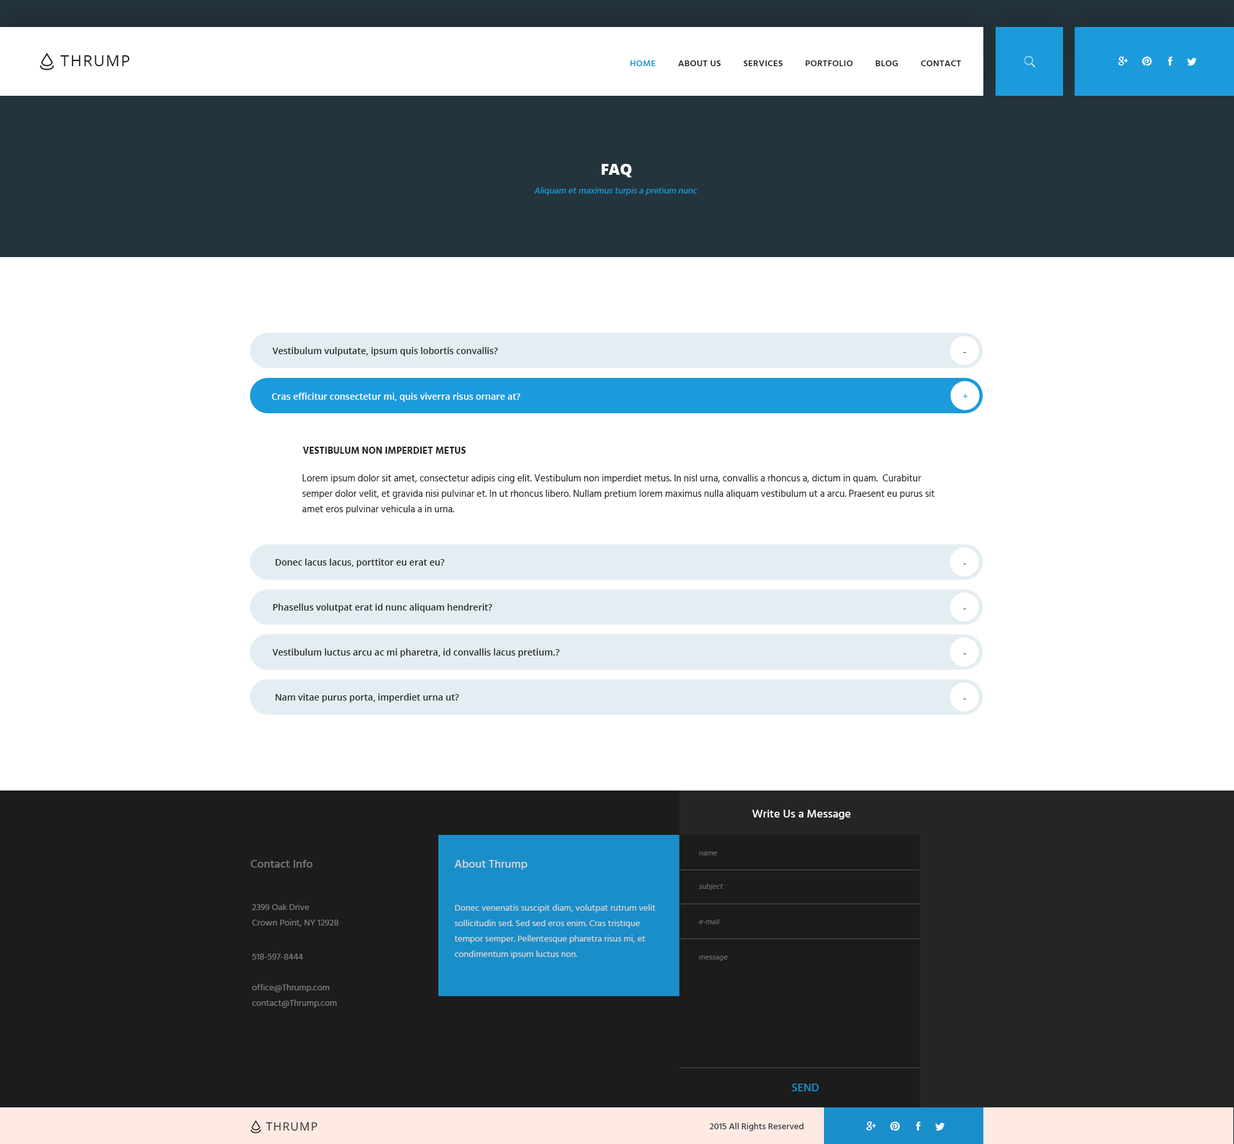
<style>
.page{position:relative;width:1234px;height:1144px;background:#ffffff}
.page>*{position:absolute;margin:0}
.t1{font:15.4px "OpenSans";letter-spacing:0.075em;color:#252525;text-transform:uppercase}
.t2{font:9px "Hind-Semibold";letter-spacing:0.025em;color:#252525;text-transform:uppercase}
.t3{font:9px "Hind-Semibold";letter-spacing:0.025em;color:#1c9bdc;text-transform:uppercase}
.t4{font:15.4px "OpenSans-Extrabold";color:#ffffff;text-transform:uppercase}
.t5{font:9px "Hind-Regular";color:#1c9bdc;font-style:italic}
.t6{font:9px "OpenSans-Semibold";color:#252525}
.t7{font:9px "OpenSans-Semibold";color:#ffffff}
.t8{font:9px "OpenSans-Semibold";color:#1c9bdc}
.t9{font:9.6px "Hind-Bold";color:#252525;text-transform:uppercase}
.t10{font:9.6px/15.4px "Hind-Regular";color:#252525}
.t11{font:11.6px "Hind-Medium";color:#ffffff}
.t12{font:7.7px "Hind-Regular";color:#686868;font-style:italic}
.t13{font:11.6px "Hind-Medium";color:#7b7b7b}
.t14{font:11.6px "Hind-Medium";color:#d6d6d6}
.t15{font:9px/15.4px "Hind-Regular";color:#7b7b7b}
.t16{font:9px/15.4px "Hind-Regular";color:#d6d6d6}
.t17{font:9px "Hind-Regular";color:#7b7b7b}
.t18{font:11.6px "Hind-Medium";color:#1a8ec9}
.t19{font:11.4px "OpenSans";letter-spacing:0.075em;color:#252525;text-transform:uppercase}
.t20{font:9px "Hind-Medium";color:#273941}
</style>
<div class="page">
<p class="t1" style="left:60px;top:55px;width:70px;height:11px">Thrump</p>
<p class="t2" style="left:630px;top:60px;width:332px;height:6px"><span class="t3">Home</span>         About Us         Services         Portfolio         Blog         Contact</p>
<p class="t4" style="left:602px;top:164px;width:30px;height:13px">FAq</p>
<p class="t5" style="left:534px;top:187px;width:164px;height:8px">Aliquam et maximus turpis a pretium nunc</p>
<p class="t6" style="left:273px;top:347px;width:225px;height:9px">Vestibulum vulputate, ipsum quis lobortis convallis?</p>
<p class="t6" style="left:964px;top:352px;width:2px;height:1px">-</p>
<p class="t7" style="left:272px;top:393px;width:249px;height:9px">Cras efficitur consectetur mi, quis viverra risus ornare at?</p>
<p class="t8" style="left:963px;top:394px;width:5px;height:5px">+</p>
<p class="t9" style="left:303px;top:447px;width:163px;height:7px">Vestibulum non imperdiet metus</p>
<p class="t10" style="left:302px;top:474px;width:633px;height:40px">Lorem ipsum dolor sit amet, consectetur adipis cing elit. Vestibulum non imperdiet metus. In nisl urna, convallis a rhoncus a, dictum in quam.  Curabitur semper dolor velit, et gravida nisi pulvinar et. In ut rhoncus libero. Nullam pretium lorem maximus nulla aliquam vestibulum ut a arcu. Praesent eu purus sit amet eros pulvinar vehicula a in urna.</p>
<p class="t6" style="left:275px;top:559px;width:170px;height:9px">Donec lacus lacus, porttitor eu erat eu?</p>
<p class="t6" style="left:964px;top:564px;width:2px;height:0px">-</p>
<p class="t6" style="left:273px;top:604px;width:219px;height:9px">Phasellus volutpat erat id nunc aliquam hendrerit?</p>
<p class="t6" style="left:964px;top:609px;width:2px;height:0px">-</p>
<p class="t6" style="left:273px;top:649px;width:287px;height:9px">Vestibulum luctus arcu ac mi pharetra, id convallis lacus pretium.?</p>
<p class="t6" style="left:964px;top:654px;width:2px;height:0px">-</p>
<p class="t6" style="left:275px;top:694px;width:184px;height:9px">Nam vitae purus porta, imperdiet urna ut?</p>
<p class="t6" style="left:964px;top:699px;width:2px;height:0px">-</p>
<p class="t11" style="left:752px;top:810px;width:99px;height:10px">Write Us a Message</p>
<p class="t12" style="left:699px;top:852px;width:18px;height:4px">name</p>
<p class="t13" style="left:251px;top:860px;width:61px;height:8px">Contact Info</p>
<p class="t14" style="left:455px;top:860px;width:73px;height:10px">About Thrump</p>
<p class="t12" style="left:699px;top:884px;width:24px;height:6px">subject</p>
<p class="t15" style="left:252px;top:904px;width:87px;height:23px">2399 Oak Drive<br>Crown Point, NY 12928</p>
<p class="t16" style="left:455px;top:905px;width:201px;height:54px">Donec venenatis suscipit diam, volutpat rutrum velit sollicitudin sed. Sed sed eros enim. Cras tristique tempor semper. Pellentesque pharetra risus mi, et condimentum ipsum luctus non.</p>
<p class="t12" style="left:699px;top:919px;width:21px;height:5px">e-mail</p>
<p class="t17" style="left:252px;top:954px;width:51px;height:6px">518-597-8444</p>
<p class="t12" style="left:699px;top:956px;width:29px;height:5px">message</p>
<p class="t15" style="left:252px;top:984px;width:85px;height:24px">office@Thrump.com<br>contact@Thrump.com</p>
<p class="t18" style="left:792px;top:1084px;width:27px;height:8px">SEND</p>
<p class="t19" style="left:266px;top:1122px;width:52px;height:9px">Thrump</p>
<p class="t20" style="left:710px;top:1123px;width:94px;height:8px">2015 All Rights Reserved</p>
</div>
